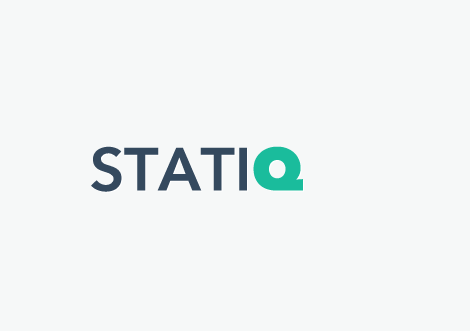
<style>
.page{position:relative;width:470px;height:331px;background:#f6f8f8}
.page>*{position:absolute;margin:0}
.t1{font:60px "AvenirNext-DemiBold";color:#34495e}
.t2{font:60px "AvenirNext-Heavy";color:#1abc9c}
</style>
<div class="page">
<p class="t1" style="left:91px;top:146px;width:212px;height:46px">STATI<span class="t2">Q</span></p>
</div>
